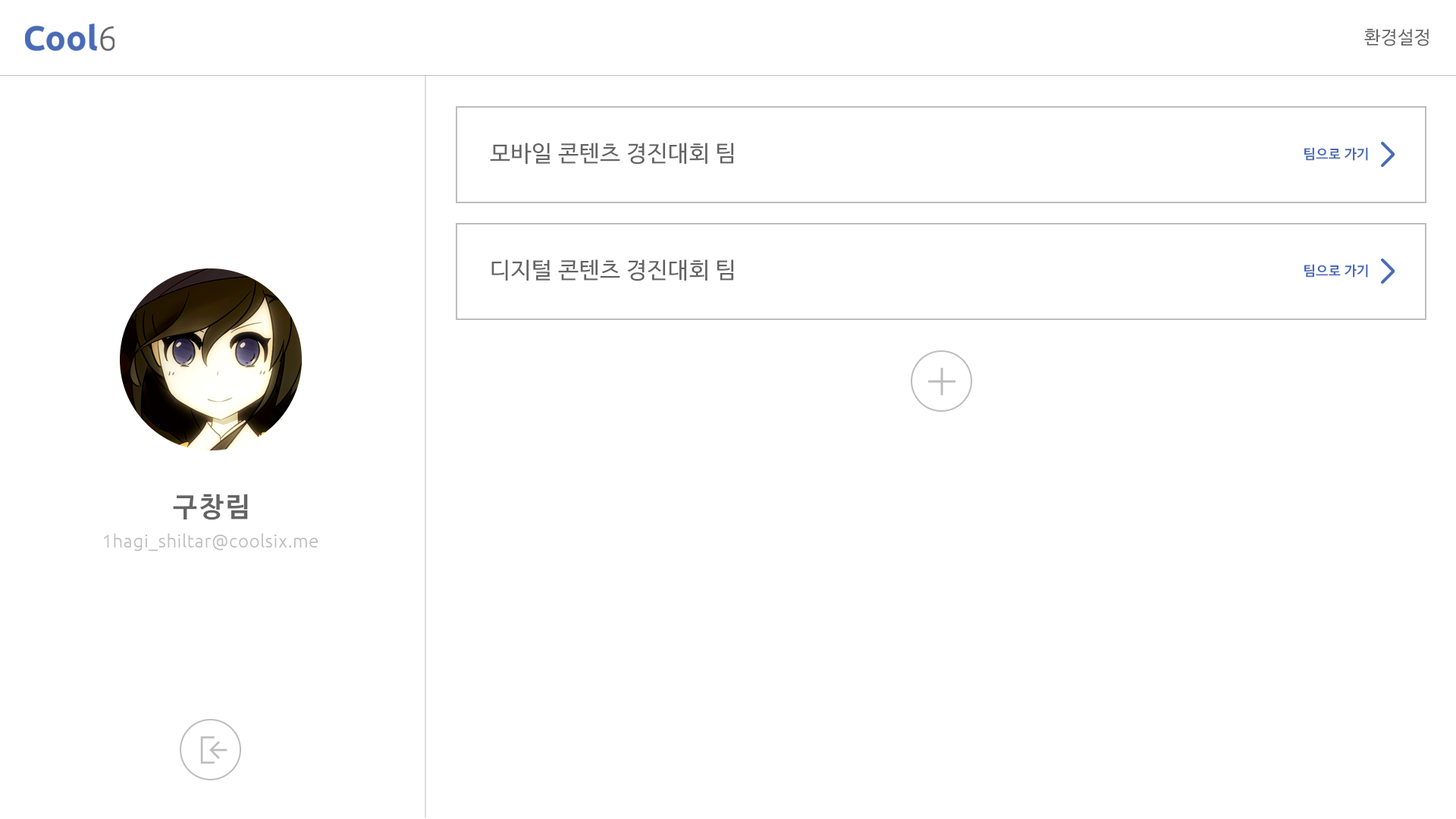
<style>
.page{position:relative;width:1456px;height:819px;background:#ffffff}
.page>*{position:absolute;margin:0}
.t1{font:18.2px "NanumBarunGothic";letter-spacing:0.025em;color:#646464}
.t2{font:22.7px "NanumBarunGothic";letter-spacing:0.025em;color:#646464}
.t3{font:13.6px "NanumBarunGothicBold";letter-spacing:0.025em;color:#496bb7}
.t4{font:27.3px "NanumBarunGothicBold";letter-spacing:0.075em;color:#646464}
.t5{font:18.2px "Ubuntu-Light";letter-spacing:0.025em;color:#bdbdbd}
</style>
<div class="page">
<p class="t1" style="left:1364px;top:29px;width:65px;height:17px">환경설정</p>
<p class="t2" style="left:490px;top:143px;width:243px;height:22px">모바일 콘텐츠 경진대회 팀</p>
<p class="t3" style="left:1304px;top:147px;width:64px;height:14px">팀으로 가기</p>
<p class="t2" style="left:491px;top:259px;width:242px;height:22px">디지털 콘텐츠 경진대회 팀</p>
<p class="t3" style="left:1304px;top:264px;width:64px;height:14px">팀으로 가기</p>
<p class="t4" style="left:173px;top:494px;width:75px;height:26px">구창림</p>
<p class="t5" style="left:104px;top:533px;width:214px;height:18px">1hagi_shiltar@coolsix.me</p>
</div>
